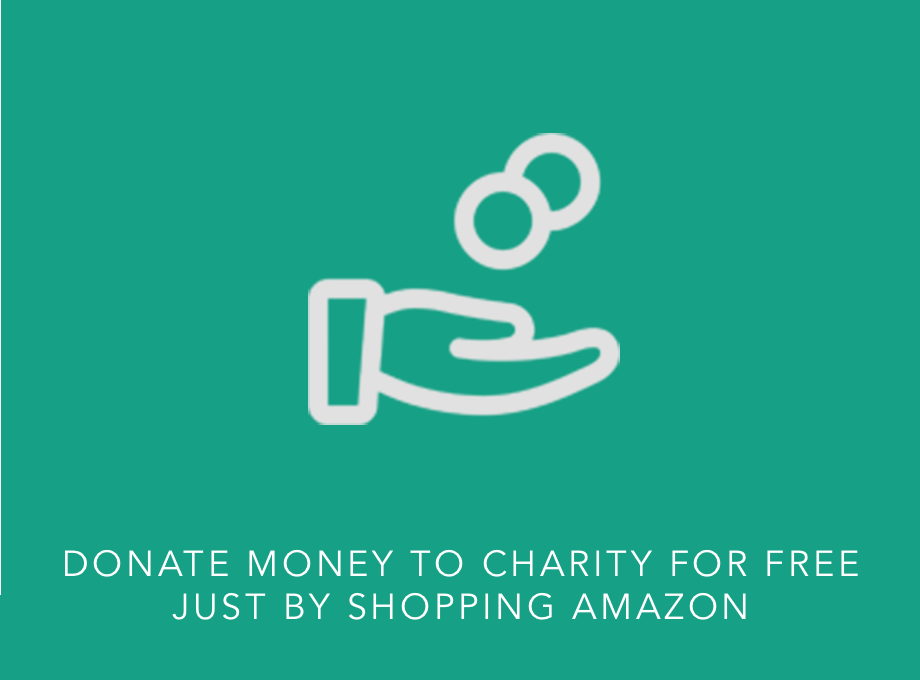
<style>
.page{position:relative;width:920px;height:680px;background:#16a085}
.page>*{position:absolute;margin:0}
.t1{font:36px "Avenir-Book";letter-spacing:0.1em;color:#ffffff;text-transform:uppercase}
</style>
<div class="page">
<p class="t1" style="left:65px;top:549px;width:793px;height:71px;text-align:center">Donate money to charity FOR free<br>just by shopping amazon</p>
</div>
